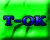
<style>
.page{position:relative;width:50px;height:40px}
.page>*{position:absolute;margin:0}
.t1{font:11.2px "MyungjoXB-HM";scale:1.53 1}
</style>
<div class="page">
<p class="t1" style="left:4px;top:16px;width:42px;height:9px">T-OK</p>
</div>
